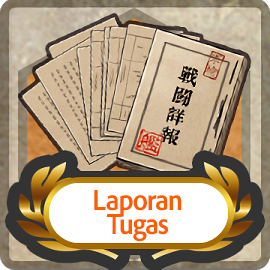
<style>
.page{position:relative;width:270px;height:270px}
.page>*{position:absolute;margin:0}
.t1{font:30px/24px "AdobeClean-Bold";letter-spacing:-0.04em;color:#ff5d00;scale:0.9 1}
</style>
<div class="page">
<p class="t1" style="left:94px;top:190px;width:88px;height:52px;text-align:center">Laporan<br>Tugas</p>
</div>
